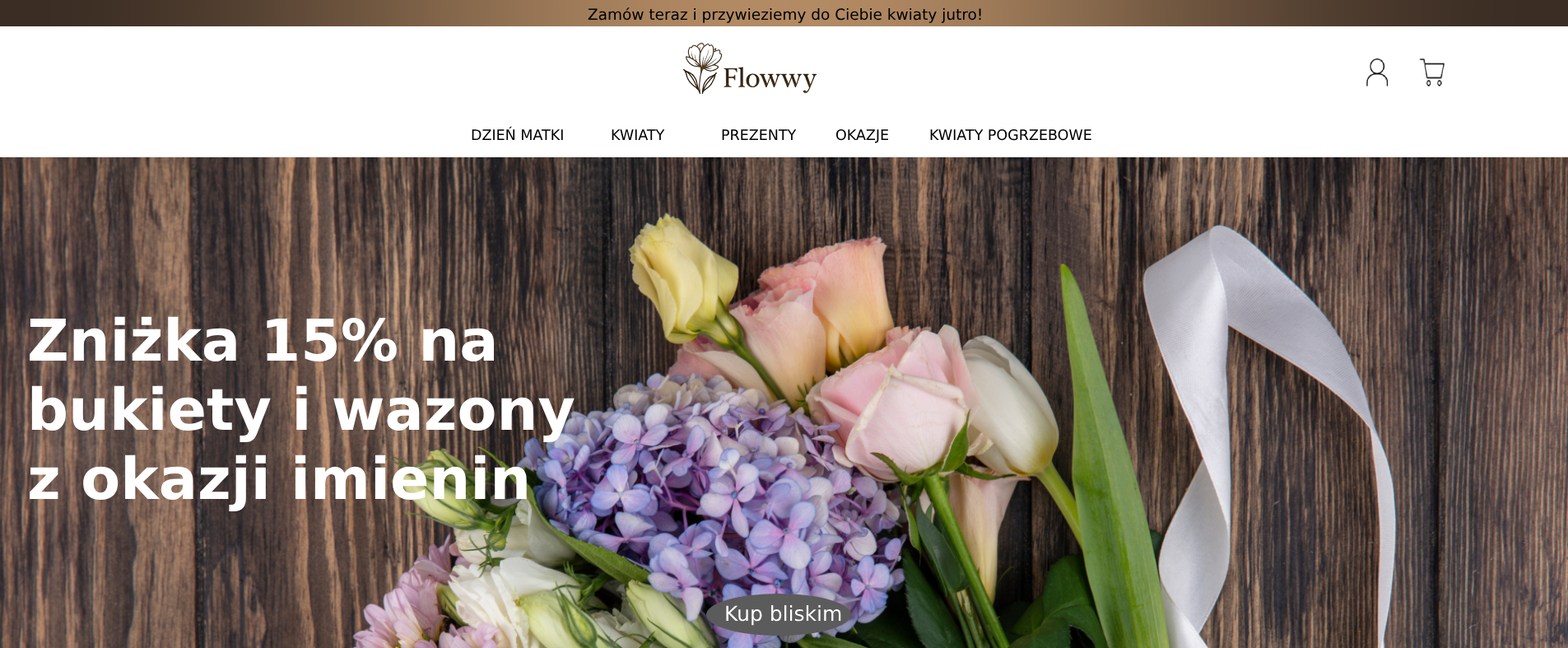
<style>
.page{position:relative;width:1568px;height:648px;background:#ffffff}
.page>*{position:absolute;margin:0}
.t1{font:15.2px "DejaVuSans";color:#000000}
.t2{font:14.4px "DejaVuSans";color:#000000}
.t3{font:57.6px "DejaVuSans-Bold";color:#ffffff}
.t4{font:20.6px "DejaVuSans";color:#ffffff}
</style>
<div class="page">
<p class="t1" style="left:588px;top:7px;width:393px;height:16px">Zamów teraz i przywieziemy do Ciebie kwiaty jutro!</p>
<p class="t2" style="left:472px;top:126px;width:91px;height:14px">DZIEŃ MATKI</p>
<p class="t2" style="left:612px;top:129px;width:53px;height:11px">KWIATY</p>
<p class="t2" style="left:722px;top:129px;width:75px;height:11px">PREZENTY</p>
<p class="t2" style="left:835px;top:129px;width:54px;height:14px">OKAZJE</p>
<p class="t2" style="left:930px;top:129px;width:161px;height:12px">KWIATY POGRZEBOWE</p>
<p class="t3" style="left:30px;top:316px;width:545px;height:196px">Zniżka 15% na<br>bukiety i wazony<br>z okazji imienin</p>
<p class="t4" style="left:726px;top:605px;width:115px;height:21px">Kup bliskim</p>
</div>
